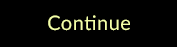
<style>
.page{position:relative;width:177px;height:47px;background:#000000}
.page>*{position:absolute;margin:0}
.t1{font:20px "Lato-Regular";letter-spacing:0.025em;color:#f4ffa8}
</style>
<div class="page">
<p class="t1" style="left:48px;top:15px;width:82px;height:16px">Continue</p>
</div>
